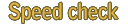
<style>
.page{position:relative;width:128px;height:24px;background:#ffffff}
.page>*{position:absolute;margin:0}
.t1{font:22px "BellGothicStd-Bold";letter-spacing:-0.025em;color:#e5b743}
</style>
<div class="page">
<p class="t1" style="left:9px;top:2px;width:109px;height:21px">Speed check</p>
</div>
